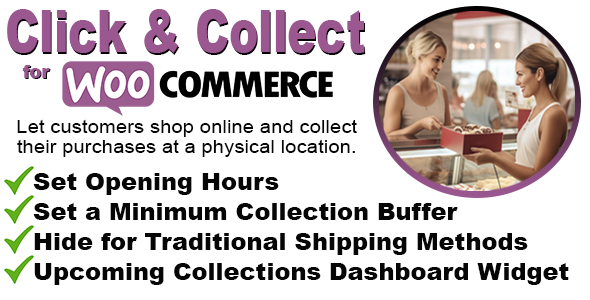
<style>
.page{position:relative;width:590px;height:300px;background:#ffffff}
.page>*{position:absolute;margin:0}
.t1{font:59.2px "Arial-Black";color:#9b5790;scale:0.74 1}
.t2{font:18px "Arial-Black";color:#9b5790}
.t3{font:18px "Arial-Black"}
.t4{font:18px/20px "ArialMT";color:#060606;scale:1.13 1}
.t5{font:24px/30px "Arial-Black";color:#060606}
</style>
<div class="page">
<p class="t1" style="left:7px;top:9px;width:358px;height:44px">Click &amp; Collect</p>
<p class="t1" style="left:8px;top:11px;width:358px;height:44px">Click &amp; Collect</p>
<p class="t2" style="left:22px;top:65px;width:28px;height:13px">for</p>
<p class="t3" style="left:23px;top:66px;width:28px;height:13px">for</p>
<p class="t4" style="left:17px;top:119px;width:340px;height:38px;text-align:center">Let customers shop online and collect<br>their purchases at a physical location.</p>
<p class="t5" style="left:33px;top:173px;width:536px;height:112px">Set Opening Hours <br>Set a Minimum Collection Buffer<br>Hide for Traditional Shipping Methods<br>Upcoming Collections Dashboard Widget</p>
</div>
